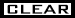
<style>
.page{position:relative;width:75px;height:18px;background:#000000}
.page>*{position:absolute;margin:0}
.t1{font:20.5px "BankGothicBT-Light";color:#000000;font-weight:bold}
</style>
<div class="page">
<p class="t1" style="left:7px;top:4px;width:62px;height:10px">clear</p>
</div>
